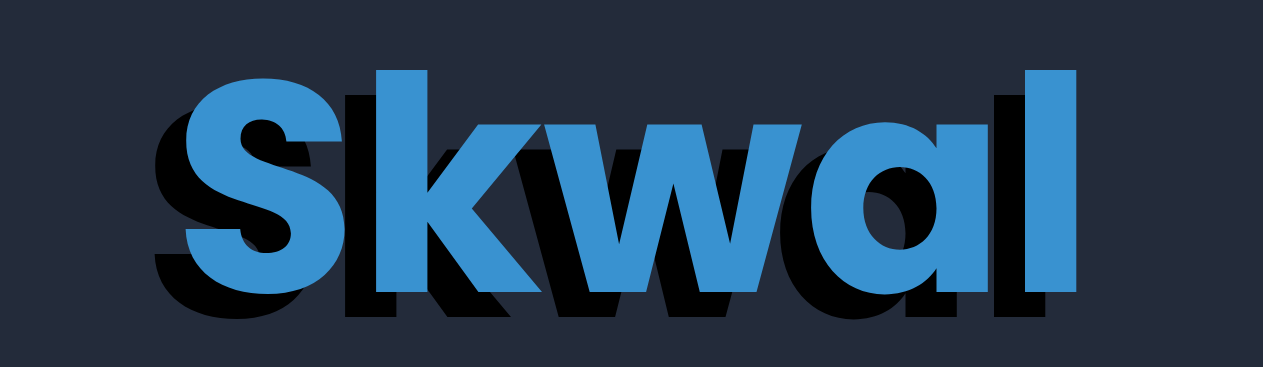
<style>
.page{position:relative;width:1263px;height:367px;background:#232b3a}
.page>*{position:absolute;margin:0}
.t1{font:300px "Poppins-Bold";color:#3992d0}
</style>
<div class="page">
<p class="t1" style="left:185px;top:70px;width:892px;height:225px">Skwal</p>
</div>
